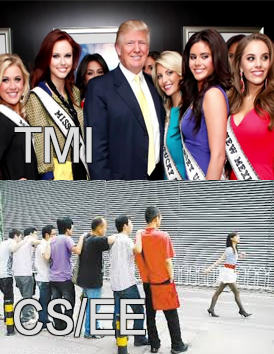
<style>
.page{position:relative;width:274px;height:354px}
.page>*{position:absolute;margin:0}
.t1{font:43.6px "FZLTZHK--GBK1-0";color:#dddddd;scale:0.91 1}
</style>
<div class="page">
<p class="t1" style="left:14px;top:127px;width:78px;height:36px">TMI</p>
<p class="t1" style="left:14px;top:298px;width:131px;height:39px">CS/EE</p>
</div>
